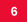
<style>
.page{position:relative;width:27px;height:22px;background:#e90d31}
.page>*{position:absolute;margin:0}
.t1{font:12.5px "Helvetica-Bold";letter-spacing:0.05em;color:#ffffff}
</style>
<div class="page">
<p class="t1" style="left:11px;top:6px;width:7px;height:10px">6</p>
</div>
